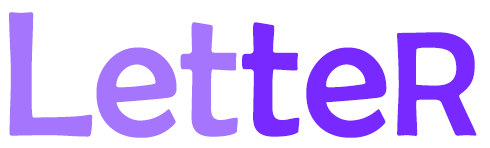
<style>
.page{position:relative;width:490px;height:148px;background:#ffffff}
.page>*{position:absolute;margin:0}
.t1{font:180px "BerlinSansFB-Reg";color:#a575fe}
.t2{font:180px "BerlinSansFB-Reg";color:#7729ff}
.t3{font:150px "BerlinSansFB-Reg";color:#7729ff}
</style>
<div class="page">
<p class="t1" style="left:9px;top:12px;width:468px;height:126px">Let<span class="t2">te</span><span class="t3">R</span></p>
</div>
